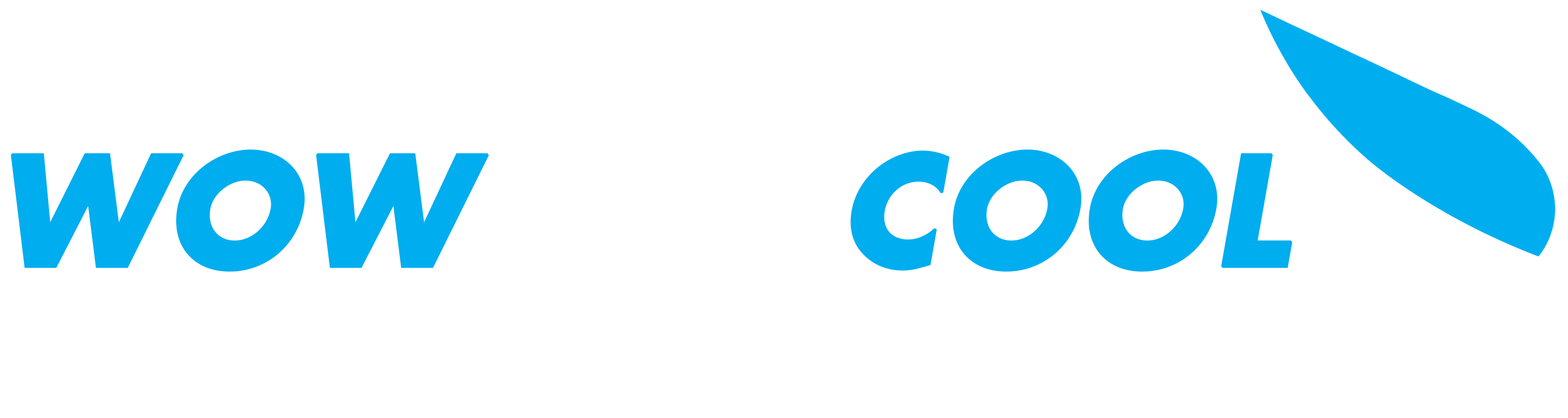
<style>
.page{position:relative;width:1568px;height:418px;background:#ffffff}
.page>*{position:absolute;margin:0}
.t1{font:148.2px "Futura-Bold";color:#00adef;text-transform:uppercase;font-weight:bold;font-style:italic}
.t2{font:148.2px "Futura-Bold";color:#ffffff;text-transform:uppercase;font-weight:bold;font-style:italic}
</style>
<div class="page">
<p class="t1" style="left:10px;top:149px;width:1283px;height:123px">wow <span class="t2">oh </span>cool</p>
</div>
